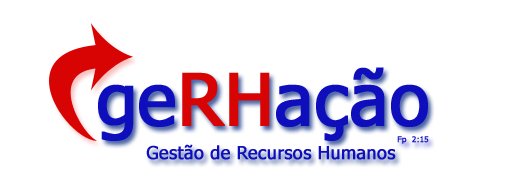
<style>
.page{position:relative;width:505px;height:177px;background:#ffffff}
.page>*{position:absolute;margin:0}
.t1{font:72px "Tahoma";color:#0e0ebc;font-weight:bold}
.t2{font:72px "Tahoma";color:#d80303;font-weight:bold}
.t3{font:8px "Tahoma";color:#0e0ebc;font-weight:bold}
.t4{font:18px "Tahoma";color:#0e0ebc;font-weight:bold}
</style>
<div class="page">
<p class="t1" style="left:98px;top:67px;width:330px;height:74px">ge<span class="t2">RH</span>ação</p>
<p class="t3" style="left:397px;top:136px;width:32px;height:8px">Fp  2:15</p>
<p class="t4" style="left:146px;top:144px;width:250px;height:16px">Gestão de Recursos Humanos</p>
</div>
